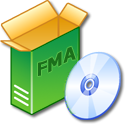
<style>
.page{position:relative;width:125px;height:124px;background:#ffffff}
.page>*{position:absolute;margin:0}
.t1{font:18px "Tahoma-Bold";color:#1b701b}
</style>
<div class="page">
<p class="t1" style="left:38px;top:46px;width:38px;height:30px">FMA</p>
</div>
